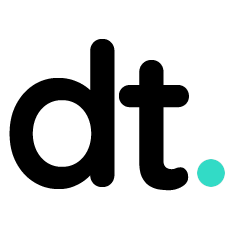
<style>
.page{position:relative;width:230px;height:230px;background:#ffffff}
.page>*{position:absolute;margin:0}
.t1{font:200px "Quicksand-Bold";letter-spacing:0.075em;color:#000000}
</style>
<div class="page">
<p class="t1" style="left:9px;top:39px;width:106px;height:150px">d</p>
<p class="t1" style="left:119px;top:60px;width:70px;height:131px">t</p>
</div>
